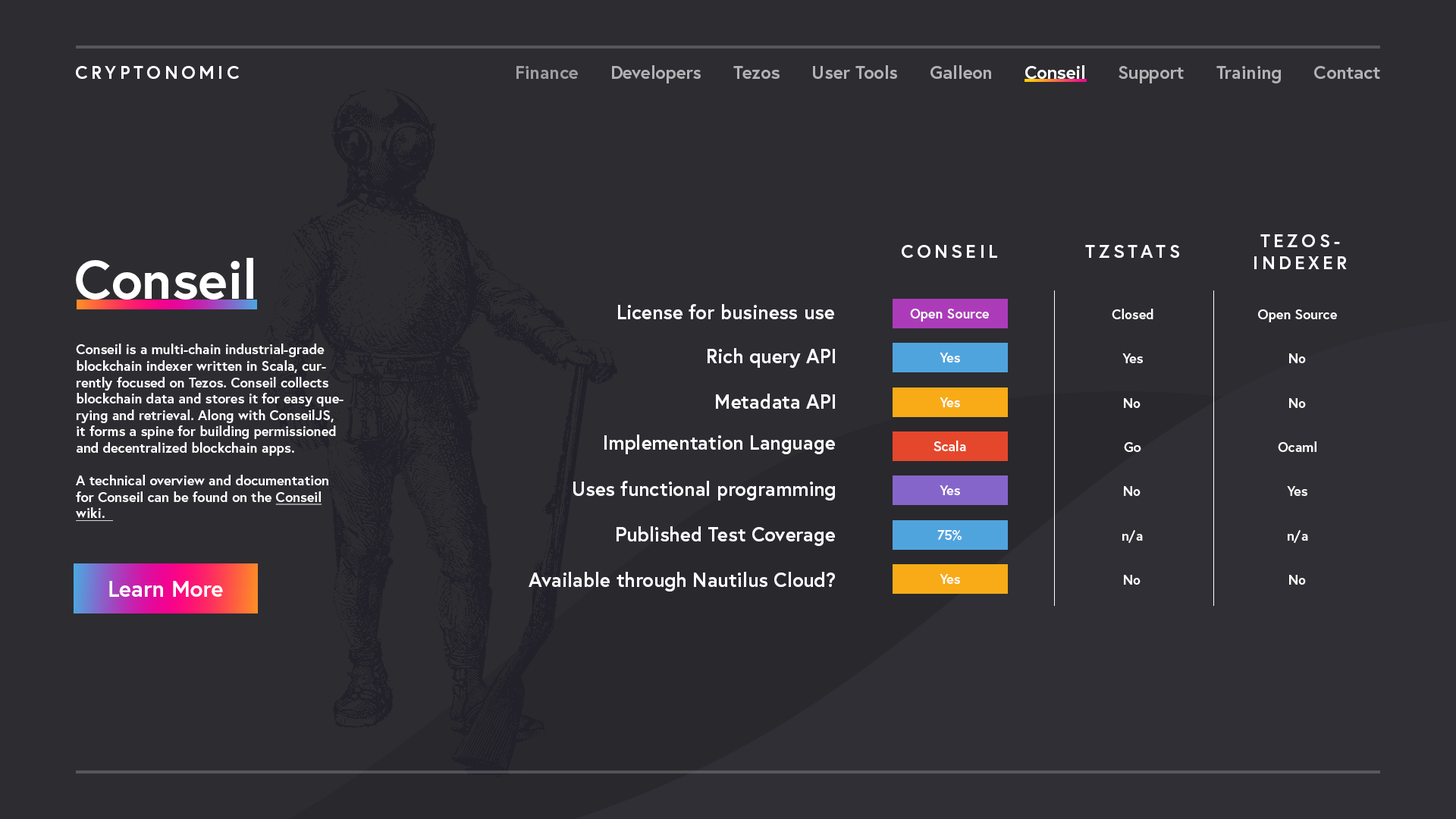
<style>
.page{position:relative;width:1456px;height:819px;background:#2d2c31}
.page>*{position:absolute;margin:0}
.t1{font:18.2px "Europa-Bold";letter-spacing:0.2em;color:#ffffff;text-transform:uppercase}
.t2{font:18.2px "Europa-Bold";color:#b2b2b2}
.t3{font:18.2px "Europa-Bold";color:#9e9e9f}
.t4{font:18.2px "Europa-Bold";color:#ffffff}
.t5{font:54.6px "Europa-Bold";color:#ffffff}
.t6{font:19.7px "Europa-Bold";color:#ffffff}
.t7{font:13.6px "Europa-Bold";color:#ffffff}
.t8{font:13.6px "Europa-Bold";color:#ffffff;text-decoration:underline}
.t9{font:22.7px "Europa-Bold";color:#ffffff}
</style>
<div class="page">
<p class="t1" style="left:76px;top:66px;width:163px;height:13px">CryptoNOMIC</p>
<p class="t2" style="left:516px;top:65px;width:864px;height:18px"><span class="t3">Finance      </span>Developers      Tezos      User Tools      Galleon      <span class="t4">Conseil      </span>Support      Training      Contact</p>
<p class="t1" style="left:902px;top:245px;width:95px;height:13px">CONSEIL</p>
<p class="t1" style="left:1085px;top:245px;width:94px;height:13px">TZSTATS</p>
<p class="t1" style="left:1254px;top:234px;width:93px;height:35px;text-align:center">tezos-<br>indexer</p>
<p class="t5" style="left:76px;top:258px;width:177px;height:42px">Conseil</p>
<p class="t6" style="left:618px;top:304px;width:216px;height:15px">License for business use</p>
<p class="t7" style="left:910px;top:309px;width:79px;height:13px">Open Source</p>
<p class="t7" style="left:1112px;top:309px;width:41px;height:10px">Closed</p>
<p class="t7" style="left:1258px;top:309px;width:79px;height:13px">Open Source</p>
<p class="t7" style="left:76px;top:344px;width:268px;height:177px">Conseil is a multi-chain industrial-grade blockchain indexer written in Scala, currently focused on Tezos. Conseil collects blockchain data and stores it for easy querying and retrieval. Along with ConseilJS, it forms a spine for building permissioned and decentralized blockchain apps.<br><br>A technical overview and documentation for Conseil can be found on the <span class="t8">Conseil wiki.</span></p>
<p class="t6" style="left:708px;top:348px;width:127px;height:20px">Rich query API</p>
<p class="t7" style="left:940px;top:353px;width:20px;height:9px">Yes</p>
<p class="t7" style="left:1122px;top:353px;width:21px;height:10px">Yes</p>
<p class="t7" style="left:1289px;top:353px;width:17px;height:10px">No</p>
<p class="t6" style="left:716px;top:394px;width:119px;height:15px">Metadata API</p>
<p class="t7" style="left:940px;top:397px;width:20px;height:10px">Yes</p>
<p class="t7" style="left:1124px;top:398px;width:17px;height:10px">No</p>
<p class="t7" style="left:1289px;top:398px;width:17px;height:10px">No</p>
<p class="t6" style="left:604px;top:435px;width:231px;height:19px">Implementation Language</p>
<p class="t7" style="left:933px;top:441px;width:33px;height:10px">Scala</p>
<p class="t7" style="left:1124px;top:442px;width:17px;height:10px">Go</p>
<p class="t7" style="left:1278px;top:441px;width:38px;height:11px">Ocaml</p>
<p class="t6" style="left:573px;top:481px;width:262px;height:19px">Uses functional programming</p>
<p class="t7" style="left:940px;top:485px;width:20px;height:10px">Yes</p>
<p class="t7" style="left:1124px;top:486px;width:17px;height:10px">No</p>
<p class="t7" style="left:1287px;top:486px;width:20px;height:10px">Yes</p>
<p class="t6" style="left:617px;top:526px;width:218px;height:20px">Published Test Coverage</p>
<p class="t7" style="left:937px;top:530px;width:25px;height:11px">75%</p>
<p class="t7" style="left:1122px;top:530px;width:21px;height:13px">n/a</p>
<p class="t7" style="left:1288px;top:530px;width:20px;height:13px">n/a</p>
<p class="t9" style="left:109px;top:581px;width:114px;height:16px">Learn More</p>
<p class="t6" style="left:529px;top:572px;width:306px;height:19px">Available through Nautilus Cloud?</p>
<p class="t7" style="left:940px;top:574px;width:20px;height:10px">Yes</p>
<p class="t7" style="left:1124px;top:575px;width:17px;height:10px">No</p>
<p class="t7" style="left:1289px;top:575px;width:17px;height:10px">No</p>
</div>
